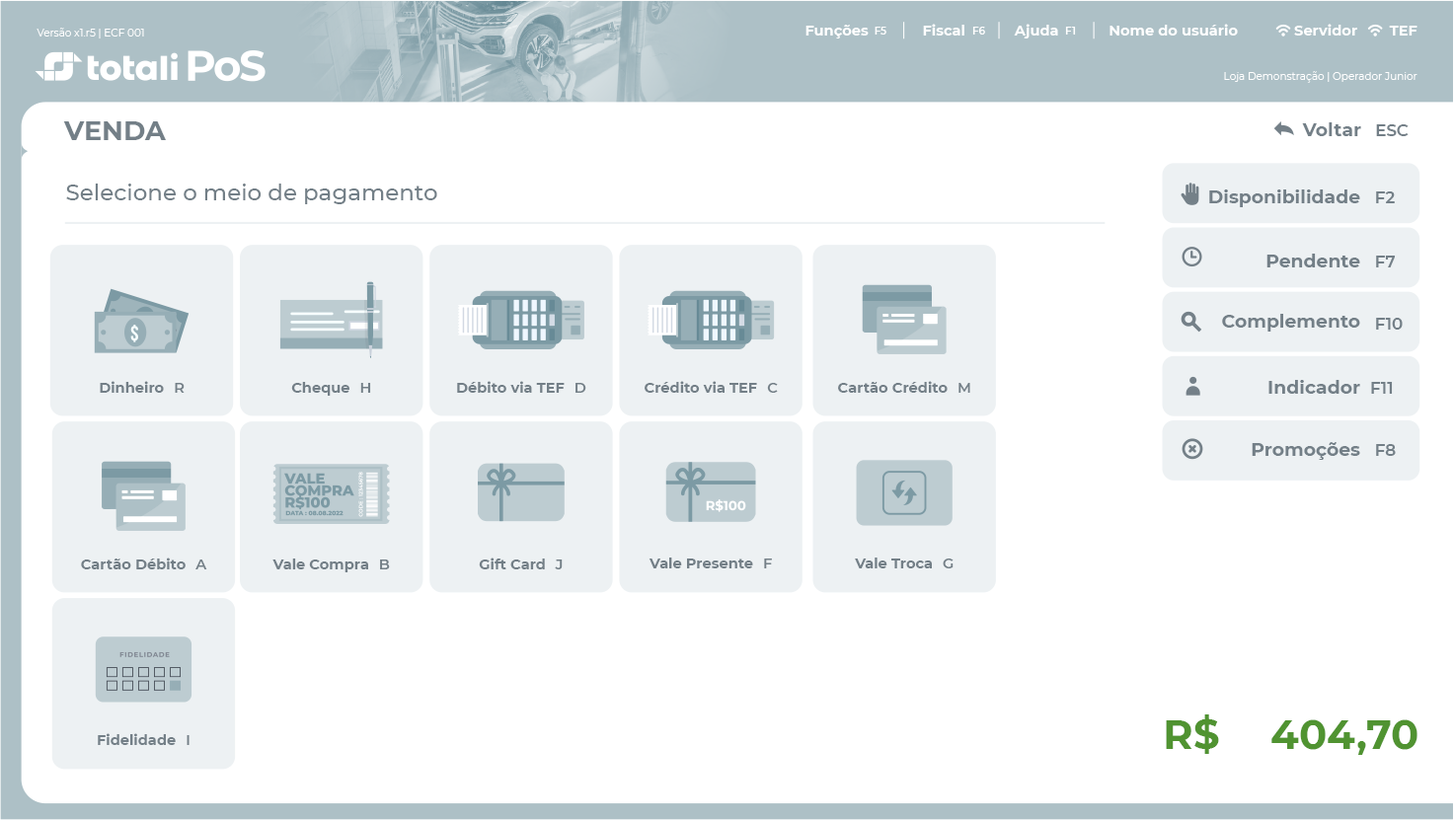
<style>
.page{position:relative;width:1454px;height:820px;background:#ffffff}
.page>*{position:absolute;margin:0}
.t1{font:10.3px "Montserrat-Regular";color:#ffffff}
.t2{font:14.4px "Montserrat-Bold";color:#ffffff}
.t3{font:10.3px "Montserrat-SemiBold";color:#ffffff}
.t4{font:26.7px "Montserrat-Bold";color:#748088}
.t5{font:18.5px "Montserrat-Bold";color:#748088}
.t6{font:16.4px "Montserrat-SemiBold";color:#748088}
.t7{font:22.6px "Montserrat-Medium";color:#748088}
.t8{font:14.4px "Montserrat-Bold";color:#748088}
.t9{font:14.4px "Montserrat-SemiBold";color:#748088}
.t10{font:41.1px "Montserrat-Bold";color:#509431}
</style>
<div class="page">
<p class="t1" style="left:37px;top:28px;width:107px;height:10px">Versão x1.r5 | ECF 001</p>
<p class="t2" style="left:805px;top:25px;width:64px;height:13px">Funções</p>
<p class="t3" style="left:874px;top:27px;width:12px;height:8px">F5</p>
<p class="t2" style="left:923px;top:24px;width:41px;height:12px">Fiscal</p>
<p class="t3" style="left:972px;top:27px;width:13px;height:8px">F6</p>
<p class="t2" style="left:1014px;top:24px;width:44px;height:14px">Ajuda</p>
<p class="t3" style="left:1065px;top:27px;width:11px;height:8px">F1</p>
<p class="t2" style="left:1109px;top:24px;width:129px;height:12px">Nome do usuário</p>
<p class="t2" style="left:1294px;top:24px;width:63px;height:12px">Servidor</p>
<p class="t2" style="left:1389px;top:26px;width:28px;height:10px">TEF</p>
<p class="t1" style="left:1224px;top:71px;width:193px;height:12px">Loja Demonstração | Operador Junior</p>
<p class="t4" style="left:63px;top:121px;width:103px;height:19px">VENDA</p>
<p class="t5" style="left:1302px;top:122px;width:59px;height:14px">Voltar</p>
<p class="t6" style="left:1376px;top:124px;width:32px;height:12px">ESC</p>
<p class="t7" style="left:66px;top:184px;width:371px;height:20px">Selecione o meio de pagamento</p>
<p class="t5" style="left:1209px;top:190px;width:151px;height:17px">Disponibilidade</p>
<p class="t6" style="left:1376px;top:191px;width:19px;height:12px">F2</p>
<p class="t5" style="left:1266px;top:254px;width:94px;height:13px">Pendente</p>
<p class="t6" style="left:1376px;top:256px;width:20px;height:11px">F7</p>
<p class="t5" style="left:1222px;top:314px;width:138px;height:18px">Complemento</p>
<p class="t6" style="left:1376px;top:318px;width:27px;height:12px">F10</p>
<p class="t8" style="left:100px;top:381px;width:64px;height:12px">Dinheiro</p>
<p class="t9" style="left:175px;top:383px;width:10px;height:10px">R</p>
<p class="t8" style="left:291px;top:382px;width:58px;height:14px">Cheque</p>
<p class="t9" style="left:360px;top:383px;width:11px;height:10px">H</p>
<p class="t8" style="left:457px;top:381px;width:108px;height:12px">Débito via TEF</p>
<p class="t9" style="left:575px;top:383px;width:11px;height:10px">D</p>
<p class="t8" style="left:645px;top:381px;width:112px;height:12px">Crédito via TEF</p>
<p class="t9" style="left:767px;top:383px;width:11px;height:10px">C</p>
<p class="t8" style="left:838px;top:381px;width:110px;height:12px">Cartão Crédito</p>
<p class="t9" style="left:958px;top:383px;width:12px;height:10px">M</p>
<p class="t5" style="left:1268px;top:380px;width:92px;height:14px">Indicador</p>
<p class="t6" style="left:1371px;top:382px;width:22px;height:12px">F11</p>
<p class="t5" style="left:1252px;top:442px;width:108px;height:18px">Promoções</p>
<p class="t6" style="left:1376px;top:444px;width:20px;height:12px">F8</p>
<p class="t8" style="left:81px;top:558px;width:105px;height:11px">Cartão Débito</p>
<p class="t8" style="left:479px;top:558px;width:66px;height:11px">Gift Card</p>
<p class="t8" style="left:648px;top:558px;width:105px;height:11px">Vale Presente</p>
<p class="t8" style="left:855px;top:558px;width:77px;height:11px">Vale Troca</p>
<p class="t9" style="left:195px;top:560px;width:12px;height:9px">A</p>
<p class="t8" style="left:272px;top:559px;width:96px;height:13px">Vale Compra</p>
<p class="t9" style="left:380px;top:560px;width:10px;height:9px">B</p>
<p class="t9" style="left:555px;top:560px;width:8px;height:9px">J</p>
<p class="t9" style="left:764px;top:559px;width:8px;height:10px">F</p>
<p class="t9" style="left:943px;top:559px;width:10px;height:10px">G</p>
<p class="t10" style="left:1166px;top:715px;width:53px;height:39px">R$</p>
<p class="t10" style="left:1271px;top:720px;width:146px;height:35px">404,70</p>
<p class="t8" style="left:98px;top:733px;width:78px;height:12px">Fidelidade</p>
<p class="t9" style="left:187px;top:735px;width:3px;height:10px">I</p>
</div>
